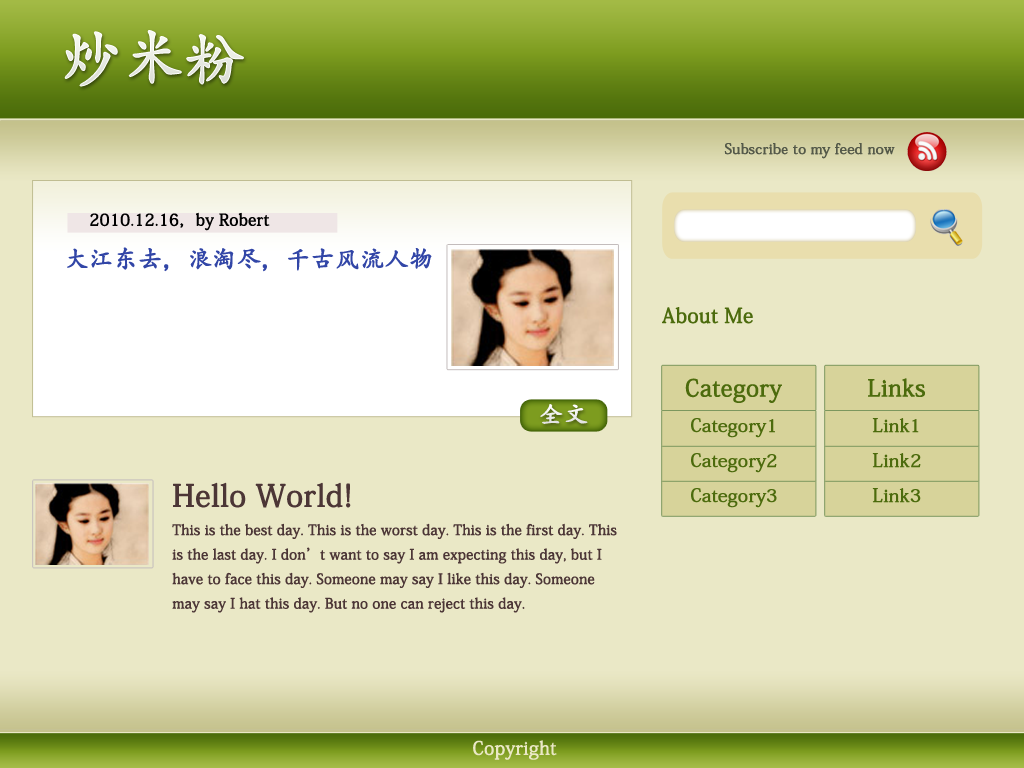
<style>
.page{position:relative;width:1024px;height:768px;background:#eae8c6}
.page>*{position:absolute;margin:0}
.t1{font:60px "AdobeKaitiStd-Regular";color:#f7faf1;font-weight:bold}
.t2{font:14px "AdobeKaitiStd-Regular";color:#545949;font-weight:bold}
.t3{font:16px "AdobeKaitiStd-Regular";color:#000000;font-weight:bold}
.t4{font:24px "AdobeKaitiStd-Regular";color:#3246a7;font-weight:bold}
.t5{font:20px "AdobeKaitiStd-Regular";color:#4c6b0d;font-weight:bold}
.t6{font:23px "AdobeKaitiStd-Regular";color:#4c6b0d;font-weight:bold}
.t7{font:24px "AdobeKaitiStd-Regular";color:#ffffff;font-weight:bold}
.t8{font:18px "AdobeKaitiStd-Regular";color:#4c6b0d;font-weight:bold}
.t9{font:30px "AdobeKaitiStd-Regular";color:#4c3636;font-weight:bold}
.t10{font:14px "AdobeKaitiStd-Regular";color:#4c3636;font-weight:bold}
.t11{font:18px "AdobeKaitiStd-Regular";color:#eae8c6;font-weight:bold}
</style>
<div class="page">
<p class="t1" style="left:64px;top:30px;width:180px;height:57px">炒米粉</p>
<p class="t2" style="left:724px;top:143px;width:171px;height:16px">Subscribe to my feed now</p>
<p class="t3" style="left:90px;top:212px;width:180px;height:19px">2010.12.16，by Robert</p>
<p class="t4" style="left:67px;top:247px;width:365px;height:25px">大江东去，浪淘尽，千古风流人物</p>
<p class="t5" style="left:662px;top:307px;width:91px;height:17px">About Me</p>
<p class="t6" style="left:685px;top:378px;width:97px;height:25px">Category</p>
<p class="t6" style="left:868px;top:378px;width:57px;height:19px">Links</p>
<p class="t7" style="left:540px;top:404px;width:48px;height:20px">全文</p>
<p class="t8" style="left:691px;top:418px;width:84px;height:20px">Category1</p>
<p class="t8" style="left:872px;top:418px;width:47px;height:15px">Link1</p>
<p class="t8" style="left:691px;top:453px;width:86px;height:20px">Category2</p>
<p class="t8" style="left:872px;top:453px;width:49px;height:15px">Link2</p>
<p class="t9" style="left:173px;top:482px;width:178px;height:26px">Hello World!</p>
<p class="t8" style="left:691px;top:488px;width:86px;height:20px">Category3</p>
<p class="t8" style="left:872px;top:488px;width:49px;height:15px">Link3</p>
<p class="t10" style="left:172px;top:523px;width:445px;height:90px">This is the best day. This is the worst day. This is the first day. This is the last day. I don’t want to say I am expecting this day, but I have to face this day. Someone may say I like this day. Someone may say I hat this day. But no one can reject this day.</p>
<p class="t11" style="left:473px;top:740px;width:84px;height:20px">Copyright</p>
</div>
